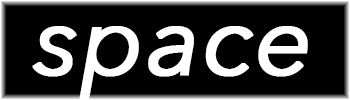
<style>
.page{position:relative;width:350px;height:100px;background:#000000}
.page>*{position:absolute;margin:0}
.t1{font:100px "AvenirNext-Italic";color:#ffffff;font-weight:bold}
</style>
<div class="page">
<p class="t1" style="left:32px;top:26px;width:276px;height:74px">space</p>
</div>
